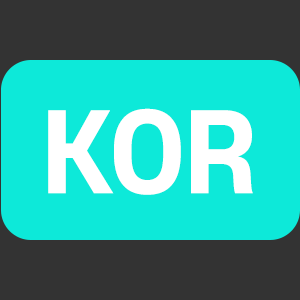
<style>
.page{position:relative;width:300px;height:300px;background:#0de9d9}
.page>*{position:absolute;margin:0}
.t1{font:104.5px "S-CoreDream-7ExtraBold";color:#ffffff}
</style>
<div class="page">
<p class="t1" style="left:48px;top:108px;width:205px;height:87px">KOR</p>
</div>
